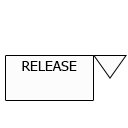
<style>
.page{position:relative;width:128px;height:128px;background:#ffffff}
.page>*{position:absolute;margin:0}
.t1{font:14px "Tahoma";color:#000000}
</style>
<div class="page">
<p class="t1" style="left:22px;top:61px;width:55px;height:10px">RELEASE</p>
</div>
